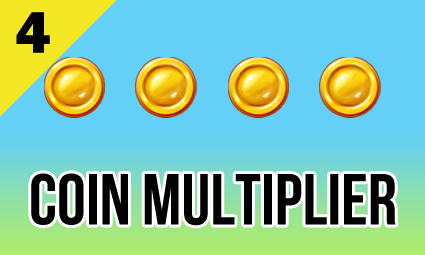
<style>
.page{position:relative;width:425px;height:255px;background:#64cff7}
.page>*{position:absolute;margin:0}
.t1{font:60px "FranklinGothic-Heavy";color:#000000}
.t2{font:72px "BebasNeueBold";color:#000000}
</style>
<div class="page">
<p class="t1" style="left:16px;top:12px;width:34px;height:41px">4</p>
<p class="t2" style="left:31px;top:173px;width:365px;height:53px">COIN MULTIPLIER</p>
</div>
